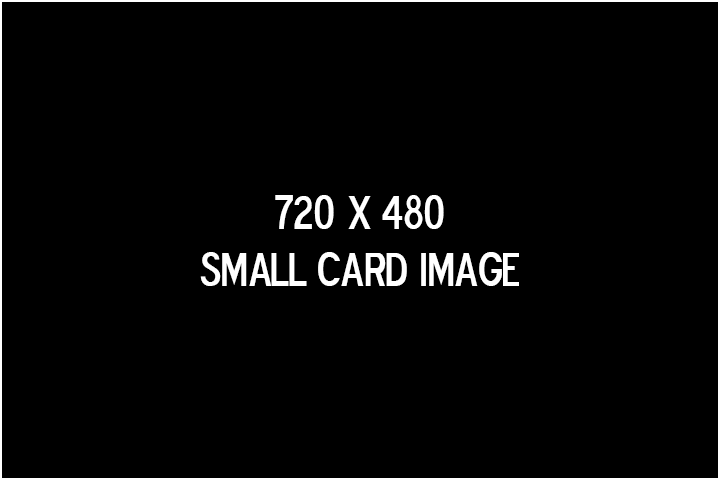
<style>
.page{position:relative;width:720px;height:480px;background:#000000}
.page>*{position:absolute;margin:0}
.t1{font:48px "BlueHighwayDType";color:#ffffff}
</style>
<div class="page">
<p class="t1" style="left:200px;top:195px;width:319px;height:91px;text-align:center">720 x 480<br>SMALL CARD IMAGE</p>
</div>
